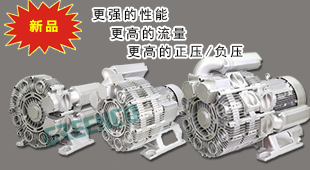
<style>
.page{position:relative;width:310px;height:170px;background:#7e7b78}
.page>*{position:absolute;margin:0}
.t1{font:13px "SimHei";letter-spacing:0.2em;color:#010101}
.t2{font:13px "MicrosoftYaHei-Bold";letter-spacing:0.2em;color:#fcff00}
</style>
<div class="page">
<p class="t1" style="left:93px;top:8px;width:75px;height:13px">更强的性能</p>
<p class="t2" style="left:29px;top:19px;width:29px;height:14px">新品</p>
<p class="t1" style="left:111px;top:27px;width:75px;height:13px">更高的流量</p>
<p class="t1" style="left:128px;top:45px;width:115px;height:13px">更高的正压/负压</p>
</div>
